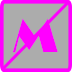
<style>
.page{position:relative;width:72px;height:72px;background:#acacac}
.page>*{position:absolute;margin:0}
.t1{font:48px "Broadway";color:#ff00ff}
</style>
<div class="page">
<p class="t1" style="left:13px;top:18px;width:45px;height:35px">M</p>
</div>
